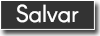
<style>
.page{position:relative;width:100px;height:36px;background:#333333}
.page>*{position:absolute;margin:0}
.t1{font:24px "Arcon-Regular";color:#ffffff}
</style>
<div class="page">
<p class="t1" style="left:16px;top:4px;width:63px;height:19px">Salvar</p>
</div>
